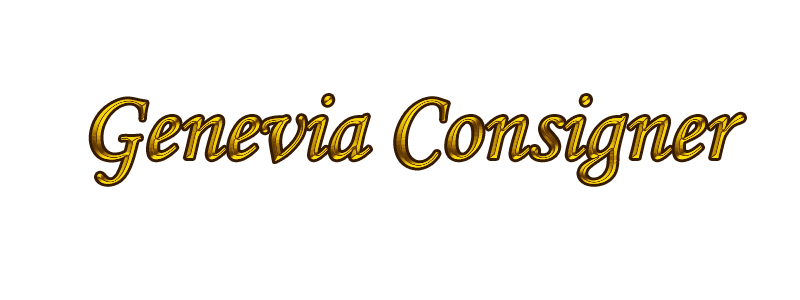
<style>
.page{position:relative;width:800px;height:300px;background:#ffffff}
.page>*{position:absolute;margin:0}
.t1{font:100px "MonotypeCorsiva"}
</style>
<div class="page">
<p class="t1" style="left:91px;top:96px;width:653px;height:88px">Genevia Consigner</p>
</div>
